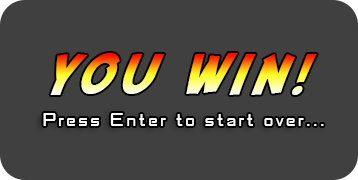
<style>
.page{position:relative;width:358px;height:180px;background:#404040}
.page>*{position:absolute;margin:0}
.t1{font:57.1px "SFFedora";letter-spacing:0.1em}
.t2{font:20.4px "SFFedoraTitles";color:#ffffff}
</style>
<div class="page">
<p class="t1" style="left:50px;top:53px;width:267px;height:42px">you win!</p>
<p class="t2" style="left:43px;top:113px;width:281px;height:13px">Press Enter to start over...</p>
</div>
